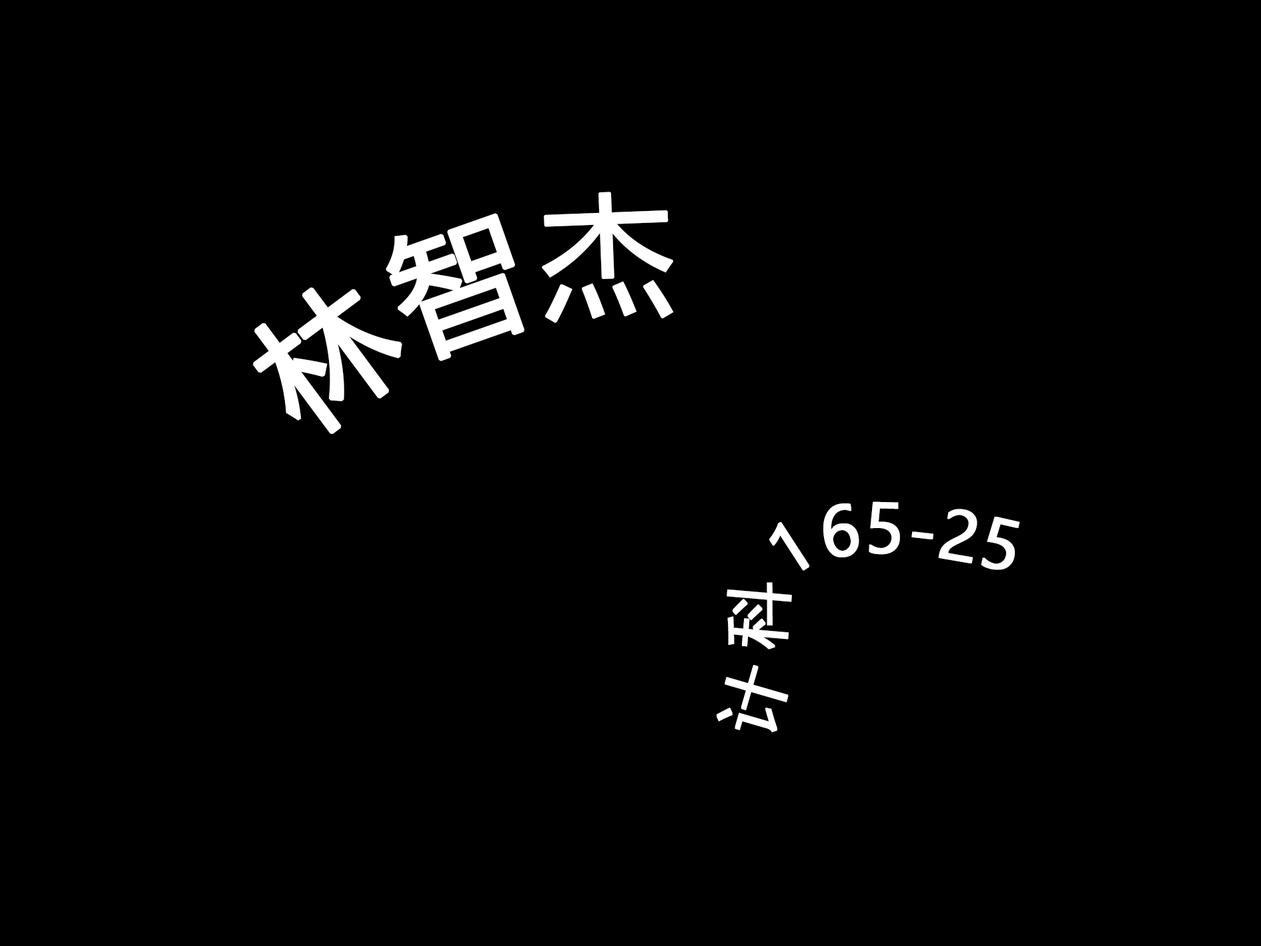
<style>
.page{position:relative;width:1261px;height:946px;background:#000000}
.page>*{position:absolute;margin:0}
.t1{font:133.5px "MicrosoftYaHei";color:#ffffff;font-weight:bold}
.t2{font:66.7px "MicrosoftYaHei";color:#ffffff;font-weight:bold}
</style>
<div class="page">
<p class="t1" style="left:253px;top:192px;width:421px;height:242px;rotate:-38deg">林智杰</p>
<p class="t2" style="left:717px;top:501px;width:303px;height:231px">计 科165-25</p>
</div>
